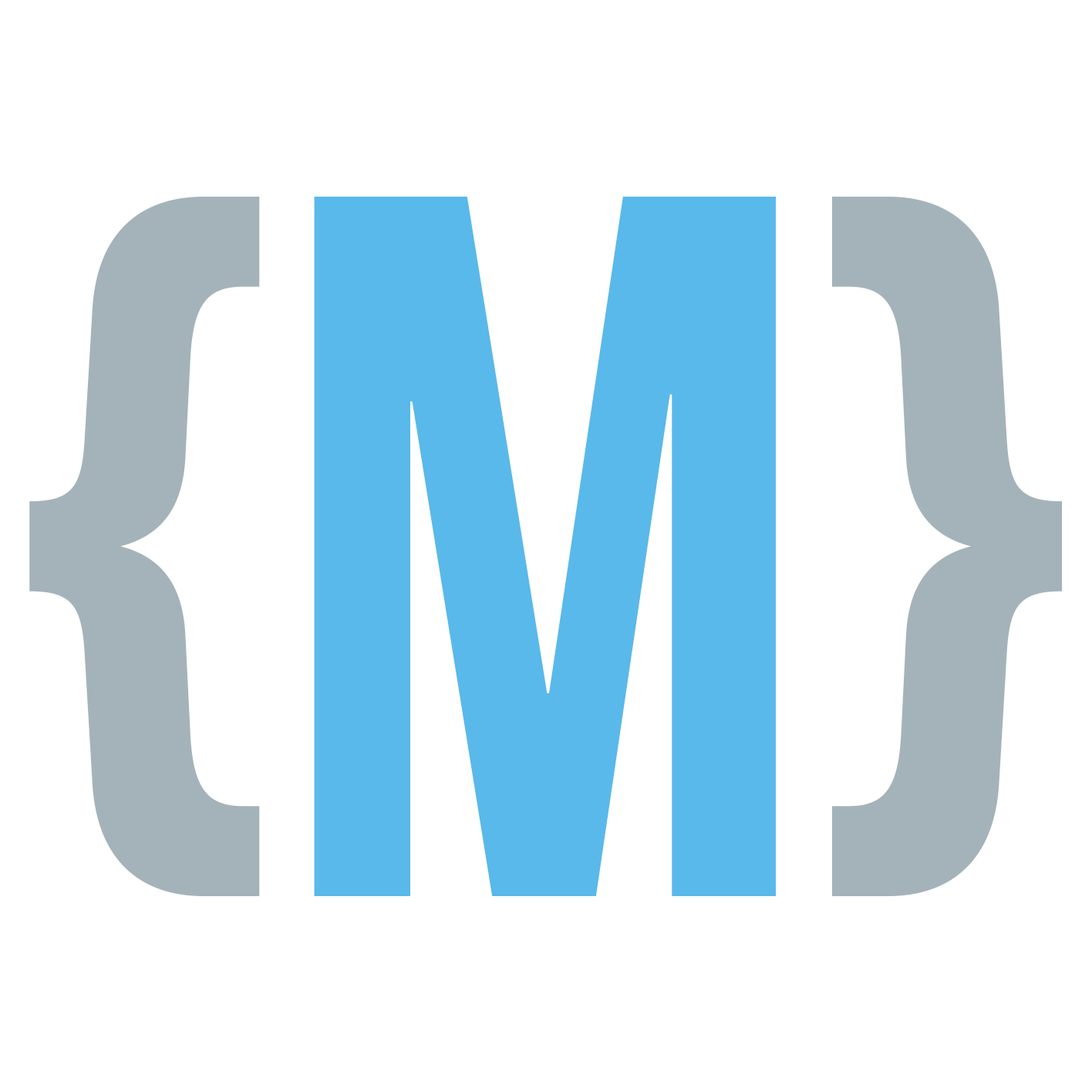
<style>
.page{position:relative;width:1092px;height:1092px;background:#ffffff}
.page>*{position:absolute;margin:0}
.t1{font:999.4px "BebasNeue";color:#a4b3ba}
.t2{font:999.4px "BebasNeue";color:#59b9ea}
</style>
<div class="page">
<p class="t1" style="left:29px;top:197px;width:1033px;height:700px">{<span class="t2">M</span>}</p>
</div>
